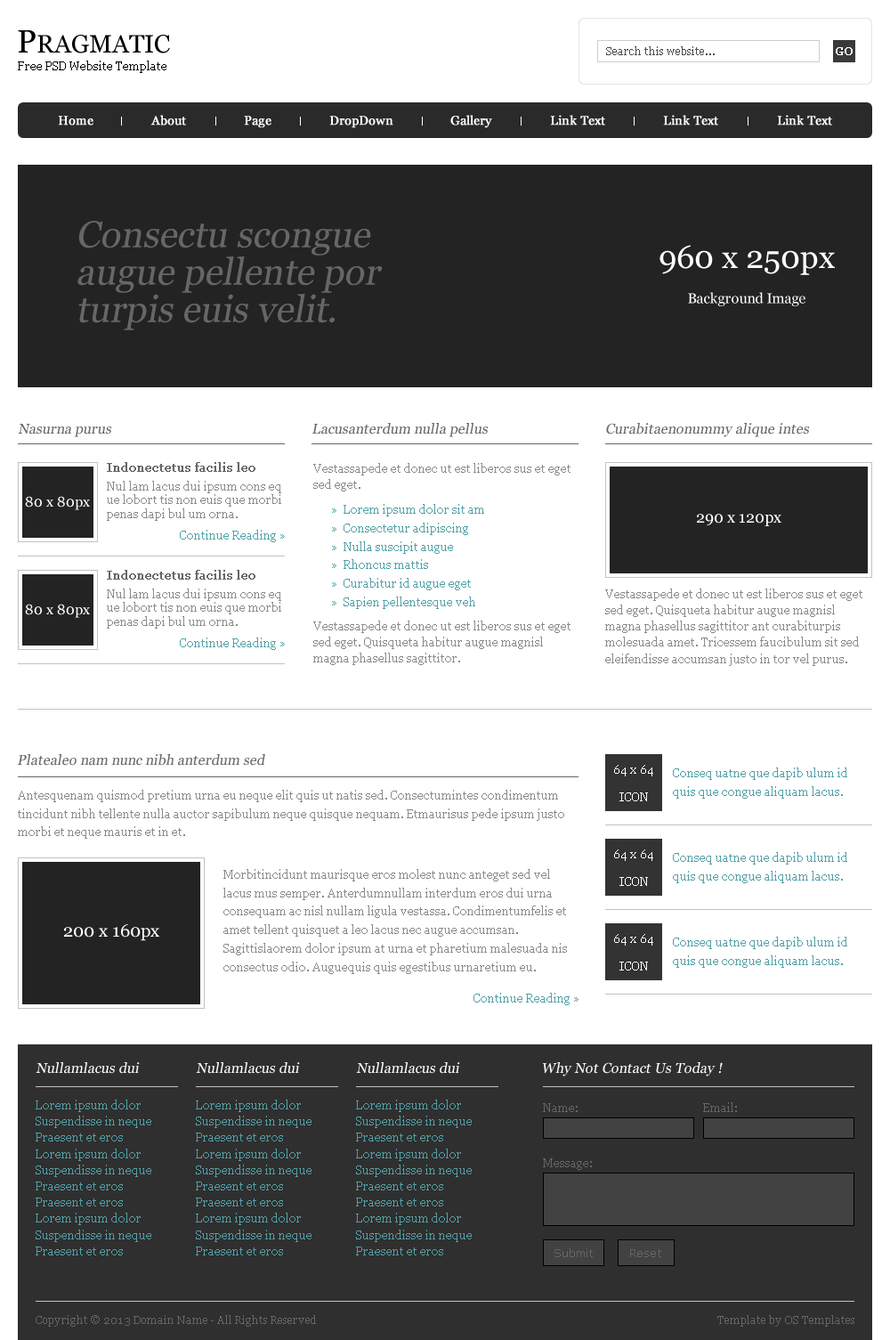
<style>
.page{position:relative;width:890px;height:1340px;background:#ffffff}
.page>*{position:absolute;margin:0}
.t1{font:24.9px "Georgia";color:#000000}
.t2{font:32px "Georgia";color:#000000}
.t3{font:10.7px "Georgia";color:#4c4c4c}
.t4{font:10.7px "Georgia";color:#ffffff;font-weight:bold}
.t5{font:11.6px "Georgia";color:#000000}
.t6{font:12.5px "Georgia";color:#ffffff;font-weight:bold}
.t7{font:37.4px/37.4px "Georgia";color:#666666;font-style:italic}
.t8{font:14.2px/35.2px "Georgia";color:#ffffff}
.t9{font:32px/35.2px "Georgia";color:#ffffff}
.t10{font:14.2px "Georgia";color:#666666;font-style:italic}
.t11{font:11.6px "Georgia";color:#666666;font-weight:bold}
.t12{font:11.6px/16.2px "Georgia";color:#8a8a8a}
.t13{font:11.6px/13.9px "Georgia";color:#8a8a8a}
.t14{font:14.2px "Georgia";color:#ffffff}
.t15{font:11.6px/18.5px "Georgia";color:#529fa6}
.t16{font:11.6px/11.6px "Georgia";color:#52a0a7}
.t17{font:16px "Georgia";color:#ffffff}
.t18{font:11.6px "Georgia";color:#52a1a8}
.t19{font:11.6px/13.9px "Georgia";color:#ffffff}
.t20{font:11.6px/18.5px "Georgia";color:#52a0a7}
.t21{font:11.6px/18.5px "Georgia";color:#8a8a8a}
.t22{font:17.8px "Georgia";color:#ffffff}
.t23{font:11.6px "Georgia";color:#52a0a7}
.t24{font:14.2px "Georgia";color:#ffffff;font-style:italic}
.t25{font:11.6px/16.2px "Georgia";color:#52a0a7}
.t26{font:11.6px "Georgia";color:#666666}
.t27{font:11.6px "Verdana";color:#666666}
.t28{font:10.7px "Georgia";color:#666666}
</style>
<div class="page">
<p class="t1" style="left:18px;top:30px;width:152px;height:23px"><span class="t2">P</span>RAGMATIC</p>
<p class="t3" style="left:606px;top:46px;width:109px;height:9px">Search this website...</p>
<p class="t4" style="left:836px;top:47px;width:17px;height:8px">GO</p>
<p class="t5" style="left:18px;top:61px;width:148px;height:12px">Free PSD Website Template</p>
<p class="t6" style="left:58px;top:116px;width:35px;height:10px">Home</p>
<p class="t6" style="left:150px;top:115px;width:36px;height:11px">About</p>
<p class="t6" style="left:244px;top:116px;width:27px;height:12px">Page</p>
<p class="t6" style="left:329px;top:116px;width:64px;height:12px">DropDown</p>
<p class="t6" style="left:450px;top:115px;width:42px;height:13px">Gallery</p>
<p class="t6" style="left:550px;top:115px;width:55px;height:11px">Link Text</p>
<p class="t6" style="left:663px;top:115px;width:55px;height:11px">Link Text</p>
<p class="t6" style="left:777px;top:115px;width:55px;height:11px">Link Text</p>
<p class="t7" style="left:77px;top:221px;width:306px;height:109px">Consectu scongue augue pellente por turpis euis velit.</p>
<p class="t8" style="left:660px;top:245px;width:175px;height:61px;text-align:center"><span class="t9">960 x 250px<br></span>Background Image</p>
<p class="t10" style="left:18px;top:424px;width:94px;height:13px">Nasurna purus</p>
<p class="t10" style="left:312px;top:423px;width:177px;height:14px">Lacusanterdum nulla pellus</p>
<p class="t10" style="left:606px;top:423px;width:204px;height:14px">Curabitaenonummy alique intes</p>
<p class="t11" style="left:107px;top:462px;width:148px;height:10px">Indonectetus facilis leo</p>
<p class="t12" style="left:313px;top:463px;width:258px;height:28px">Vestassapede et donec ut est liberos sus et eget sed eget.</p>
<p class="t13" style="left:107px;top:481px;width:174px;height:40px">Nul lam lacus dui ipsum cons eq ue lobort tis non euis que morbi penas dapi bul um orna.</p>
<p class="t14" style="left:25px;top:496px;width:65px;height:14px">80 x 80px</p>
<p class="t15" style="left:332px;top:504px;width:152px;height:105px"><span class="t16">»  </span>Lorem ipsum dolor sit am<br><span class="t16">»  </span>Consectetur adipiscing<br><span class="t16">»  </span>Nulla suscipit augue<br><span class="t16">»  </span>Rhoncus mattis<br><span class="t16">»  </span>Curabitur id augue eget<br><span class="t16">»  </span>Sapien pellentesque veh</p>
<p class="t17" style="left:697px;top:514px;width:85px;height:12px">290 x 120px</p>
<p class="t18" style="left:180px;top:530px;width:105px;height:12px">Continue Reading »</p>
<p class="t11" style="left:107px;top:570px;width:148px;height:9px">Indonectetus facilis leo</p>
<p class="t13" style="left:107px;top:588px;width:174px;height:40px">Nul lam lacus dui ipsum cons eq ue lobort tis non euis que morbi penas dapi bul um orna.</p>
<p class="t12" style="left:605px;top:588px;width:258px;height:78px">Vestassapede et donec ut est liberos sus et eget sed eget. Quisqueta habitur augue magnisl magna phasellus sagittitor ant curabiturpis molesuada amet. Tricessem faucibulum sit sed eleifendisse accumsan justo in tor vel purus.</p>
<p class="t14" style="left:25px;top:604px;width:65px;height:14px">80 x 80px</p>
<p class="t12" style="left:313px;top:620px;width:258px;height:45px">Vestassapede et donec ut est liberos sus et eget sed eget. Quisqueta habitur augue magnisl magna phasellus sagittitor.</p>
<p class="t18" style="left:180px;top:637px;width:105px;height:13px">Continue Reading »</p>
<p class="t10" style="left:17px;top:754px;width:248px;height:12px">Platealeo nam nunc nibh anterdum sed</p>
<p class="t19" style="left:614px;top:765px;width:39px;height:36px;text-align:center">64 x 64<br><br>ICON</p>
<p class="t20" style="left:673px;top:767px;width:174px;height:31px">Conseq uatne que dapib ulum id quis que congue aliquam lacus.</p>
<p class="t21" style="left:18px;top:790px;width:546px;height:48px">Antesquenam quismod pretium urna eu neque elit quis ut natis sed. Consectumintes condimentum tincidunt nibh tellente nulla auctor sapibulum neque quisque nequam. Etmaurisus pede ipsum justo morbi et neque mauris et in et.</p>
<p class="t19" style="left:614px;top:849px;width:39px;height:37px;text-align:center">64 x 64<br><br>ICON</p>
<p class="t20" style="left:673px;top:852px;width:174px;height:31px">Conseq uatne que dapib ulum id quis que congue aliquam lacus.</p>
<p class="t21" style="left:223px;top:869px;width:344px;height:105px">Morbitincidunt maurisque eros molest nunc anteget sed vel lacus mus semper. Anterdumnullam interdum eros dui urna consequam ac nisl nullam ligula vestassa. Condimentumfelis et amet tellent quisquet a leo lacus nec augue accumsan. Sagittislaorem dolor ipsum at urna et pharetium malesuada nis consectus odio. Auguequis quis egestibus urnaretium eu.</p>
<p class="t22" style="left:64px;top:924px;width:95px;height:17px">200 x 160px</p>
<p class="t19" style="left:614px;top:934px;width:39px;height:36px;text-align:center">64 x 64<br><br>ICON</p>
<p class="t20" style="left:673px;top:936px;width:174px;height:32px">Conseq uatne que dapib ulum id quis que congue aliquam lacus.</p>
<p class="t23" style="left:474px;top:992px;width:105px;height:13px">Continue Reading »</p>
<p class="t24" style="left:36px;top:1062px;width:104px;height:11px">Nullamlacus dui</p>
<p class="t24" style="left:196px;top:1062px;width:104px;height:11px">Nullamlacus dui</p>
<p class="t24" style="left:356px;top:1062px;width:104px;height:11px">Nullamlacus dui</p>
<p class="t24" style="left:542px;top:1062px;width:181px;height:14px">Why Not Contact Us Today !</p>
<p class="t25" style="left:36px;top:1099px;width:115px;height:156px">Lorem ipsum dolor<br>Suspendisse in neque<br>Praesent et eros<br>Lorem ipsum dolor<br>Suspendisse in neque<br>Praesent et eros<br>Praesent et eros<br>Lorem ipsum dolor<br>Suspendisse in neque<br>Praesent et eros</p>
<p class="t25" style="left:196px;top:1099px;width:116px;height:156px">Lorem ipsum dolor<br>Suspendisse in neque<br>Praesent et eros<br>Lorem ipsum dolor<br>Suspendisse in neque<br>Praesent et eros<br>Praesent et eros<br>Lorem ipsum dolor<br>Suspendisse in neque<br>Praesent et eros</p>
<p class="t25" style="left:356px;top:1099px;width:116px;height:156px">Lorem ipsum dolor<br>Suspendisse in neque<br>Praesent et eros<br>Lorem ipsum dolor<br>Suspendisse in neque<br>Praesent et eros<br>Praesent et eros<br>Lorem ipsum dolor<br>Suspendisse in neque<br>Praesent et eros</p>
<p class="t26" style="left:543px;top:1103px;width:35px;height:9px">Name:</p>
<p class="t26" style="left:703px;top:1102px;width:34px;height:10px">Email:</p>
<p class="t26" style="left:543px;top:1158px;width:49px;height:12px">Message:</p>
<p class="t27" style="left:555px;top:1248px;width:38px;height:9px">Submit</p>
<p class="t27" style="left:630px;top:1249px;width:31px;height:8px">Reset</p>
<p class="t28" style="left:36px;top:1315px;width:280px;height:11px">Copyright © 2013 Domain Name - All Rights Reserved</p>
<p class="t28" style="left:717px;top:1315px;width:138px;height:11px">Template by OS Templates</p>
</div>
